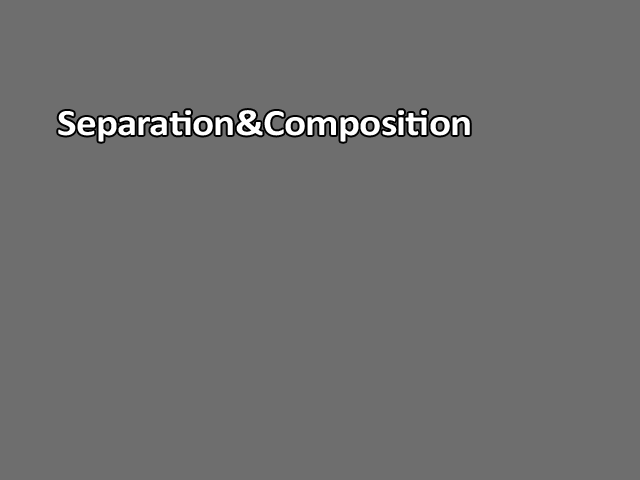
<style>
.page{position:relative;width:640px;height:480px;background:#6e6e6e}
.page>*{position:absolute;margin:0}
.t1{font:37.5px "Calibri-Bold";letter-spacing:-0.02em;color:#ffffff;scale:1.1 1}
</style>
<div class="page">
<p class="t1" style="left:58px;top:110px;width:412px;height:32px">Separation&amp;Composition</p>
</div>
